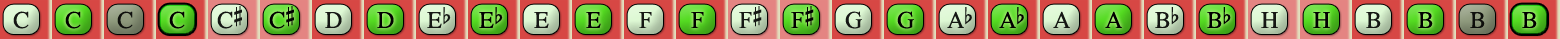
<style>
.page{position:relative;width:1560px;height:39px}
.page>*{position:absolute;margin:0}
.t1{font:24px "OpusChords";color:#000000}
.t2{font:24px "OpusChords";letter-spacing:-0.05em;color:#000000}
</style>
<div class="page">
<p class="t1" style="left:217px;top:6px;width:25px;height:23px;opacity:0.9">C#</p>
<p class="t1" style="left:269px;top:6px;width:25px;height:23px">C#</p>
<p class="t1" style="left:739px;top:6px;width:23px;height:22px;opacity:0.9">F#</p>
<p class="t1" style="left:791px;top:6px;width:23px;height:22px">F#</p>
<p class="t1" style="left:13px;top:11px;width:16px;height:18px;opacity:0.9">C</p>
<p class="t1" style="left:65px;top:11px;width:16px;height:18px">C</p>
<p class="t1" style="left:117px;top:11px;width:16px;height:18px;opacity:0.9">C</p>
<p class="t1" style="left:169px;top:11px;width:16px;height:18px">C</p>
<p class="t1" style="left:325px;top:12px;width:17px;height:16px;opacity:0.9">D</p>
<p class="t1" style="left:377px;top:12px;width:17px;height:16px">D</p>
<p class="t1" style="left:427px;top:7px;width:24px;height:21px;opacity:0.9">Eb</p>
<p class="t1" style="left:479px;top:7px;width:24px;height:21px">Eb</p>
<p class="t1" style="left:534px;top:12px;width:15px;height:16px;opacity:0.9">E</p>
<p class="t1" style="left:586px;top:12px;width:15px;height:16px">E</p>
<p class="t1" style="left:639px;top:12px;width:13px;height:16px;opacity:0.9">F</p>
<p class="t1" style="left:691px;top:12px;width:13px;height:16px">F</p>
<p class="t1" style="left:845px;top:11px;width:17px;height:18px;opacity:0.9">G</p>
<p class="t1" style="left:897px;top:11px;width:17px;height:18px">G</p>
<p class="t2" style="left:947px;top:7px;width:25px;height:21px;opacity:0.9">Ab</p>
<p class="t2" style="left:999px;top:7px;width:25px;height:21px">Ab</p>
<p class="t1" style="left:1053px;top:11px;width:17px;height:17px;opacity:0.9">A</p>
<p class="t1" style="left:1105px;top:11px;width:17px;height:17px">A</p>
<p class="t1" style="left:1155px;top:7px;width:24px;height:21px;opacity:0.9">Bb</p>
<p class="t1" style="left:1207px;top:7px;width:24px;height:21px">Bb</p>
<p class="t1" style="left:1261px;top:12px;width:17px;height:16px;opacity:0.9">H</p>
<p class="t1" style="left:1313px;top:12px;width:17px;height:16px">H</p>
<p class="t1" style="left:1366px;top:12px;width:15px;height:16px;opacity:0.9">B</p>
<p class="t1" style="left:1418px;top:12px;width:15px;height:16px">B</p>
<p class="t1" style="left:1470px;top:12px;width:15px;height:16px;opacity:0.9">B</p>
<p class="t1" style="left:1522px;top:12px;width:15px;height:16px">B</p>
</div>
